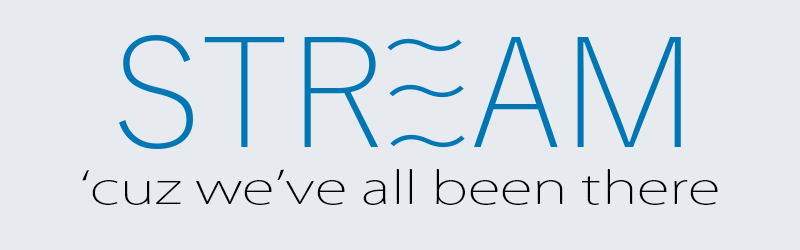
<style>
.page{position:relative;width:800px;height:250px;background:#e7ebef}
.page>*{position:absolute;margin:0}
.t1{font:43.7px "KozGoPr6N-ExtraLight";color:#000000;scale:1.37 1}
</style>
<div class="page">
<p class="t1" style="left:82px;top:169px;width:636px;height:36px">‘cuz we’ve all been there</p>
</div>
